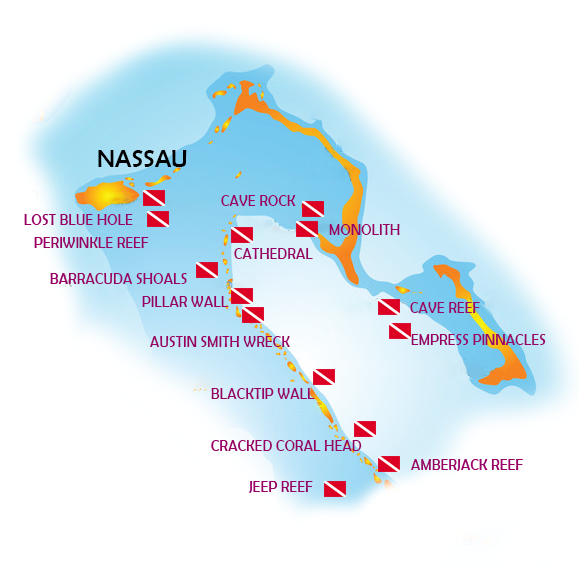
<style>
.page{position:relative;width:579px;height:568px;background:#ffffff}
.page>*{position:absolute;margin:0}
.t1{font:25px "BerlinSansFB-Reg";color:#000000}
.t2{font:16.3px "BerlinSansFB-Reg";color:#990066;scale:0.88 1}
</style>
<div class="page">
<p class="t1" style="left:98px;top:150px;width:89px;height:17px">NASSAU</p>
<p class="t2" style="left:221px;top:195px;width:75px;height:11px">CAVE ROCK</p>
<p class="t2" style="left:24px;top:214px;width:109px;height:11px">LOST BLUE HOLE</p>
<p class="t2" style="left:329px;top:224px;width:71px;height:11px">MONOLITH</p>
<p class="t2" style="left:34px;top:237px;width:115px;height:11px">PERIWINKLE REEF</p>
<p class="t2" style="left:234px;top:248px;width:79px;height:11px">CATHEDRAL</p>
<p class="t2" style="left:50px;top:273px;width:137px;height:11px">BARRACUDA SHOALS</p>
<p class="t2" style="left:142px;top:296px;width:87px;height:11px">PILLAR WALL</p>
<p class="t2" style="left:410px;top:302px;width:70px;height:11px">CAVE REEF</p>
<p class="t2" style="left:150px;top:336px;width:140px;height:11px">AUSTIN SMITH WRECK</p>
<p class="t2" style="left:411px;top:334px;width:135px;height:11px">EMPRESS PINNACLES</p>
<p class="t2" style="left:211px;top:388px;width:104px;height:11px">BLACKTIP WALL</p>
<p class="t2" style="left:211px;top:440px;width:151px;height:11px">CRACKED CORAL HEAD</p>
<p class="t2" style="left:411px;top:459px;width:112px;height:12px">AMBERJACK REEF</p>
<p class="t2" style="left:249px;top:481px;width:64px;height:12px">JEEP REEF</p>
</div>
